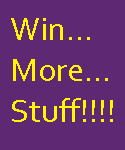
<style>
.page{position:relative;width:125px;height:150px;background:#5f2872}
.page>*{position:absolute;margin:0}
.t1{font:34px "Corbel";color:#fff600}
</style>
<div class="page">
<p class="t1" style="left:11px;top:18px;width:102px;height:104px">Win... <br>More... <br>Stuff!!!!</p>
</div>
